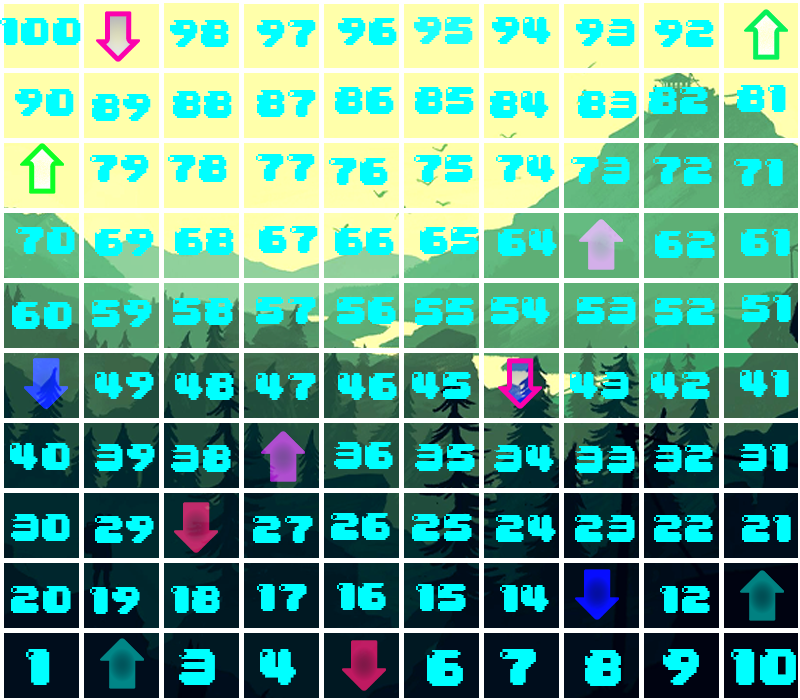
<style>
.page{position:relative;width:800px;height:700px}
.page>*{position:absolute;margin:0}
.t1{font:33.3px "04b30";color:#1efffc}
.t2{font:33.3px "04b30";color:#00ffff}
.t3{font:43.7px "04b30";color:#00ffff}
</style>
<div class="page">
<p class="t1" style="left:414px;top:17px;width:59px;height:27px">95</p>
<p class="t2" style="left:492px;top:17px;width:59px;height:27px">94</p>
<p class="t2" style="left:0px;top:18px;width:81px;height:27px">100</p>
<p class="t2" style="left:170px;top:20px;width:59px;height:27px">98</p>
<p class="t2" style="left:257px;top:20px;width:59px;height:27px">97</p>
<p class="t2" style="left:338px;top:18px;width:59px;height:27px">96</p>
<p class="t2" style="left:576px;top:19px;width:59px;height:27px">93</p>
<p class="t2" style="left:655px;top:20px;width:59px;height:27px">92</p>
<p class="t2" style="left:15px;top:89px;width:59px;height:27px">90</p>
<p class="t2" style="left:335px;top:87px;width:59px;height:27px">86</p>
<p class="t2" style="left:415px;top:87px;width:59px;height:27px">85</p>
<p class="t2" style="left:649px;top:87px;width:59px;height:27px">82</p>
<p class="t2" style="left:737px;top:85px;width:49px;height:27px">81</p>
<p class="t2" style="left:92px;top:94px;width:59px;height:27px">89</p>
<p class="t2" style="left:173px;top:91px;width:59px;height:27px">88</p>
<p class="t2" style="left:257px;top:90px;width:59px;height:27px">87</p>
<p class="t2" style="left:490px;top:91px;width:59px;height:27px">84</p>
<p class="t2" style="left:578px;top:91px;width:59px;height:27px">83</p>
<p class="t2" style="left:90px;top:155px;width:59px;height:27px">79</p>
<p class="t2" style="left:168px;top:155px;width:59px;height:27px">78</p>
<p class="t2" style="left:256px;top:154px;width:59px;height:27px">77</p>
<p class="t2" style="left:329px;top:158px;width:59px;height:27px">76</p>
<p class="t2" style="left:414px;top:155px;width:59px;height:27px">75</p>
<p class="t2" style="left:496px;top:155px;width:59px;height:27px">74</p>
<p class="t2" style="left:571px;top:157px;width:59px;height:27px">73</p>
<p class="t2" style="left:653px;top:157px;width:59px;height:27px">72</p>
<p class="t2" style="left:734px;top:159px;width:49px;height:27px">71</p>
<p class="t2" style="left:16px;top:227px;width:59px;height:27px">70</p>
<p class="t2" style="left:95px;top:229px;width:59px;height:27px">69</p>
<p class="t2" style="left:175px;top:228px;width:59px;height:27px">68</p>
<p class="t2" style="left:259px;top:226px;width:59px;height:27px">67</p>
<p class="t2" style="left:335px;top:228px;width:59px;height:27px">66</p>
<p class="t2" style="left:420px;top:227px;width:59px;height:27px">65</p>
<p class="t2" style="left:498px;top:229px;width:59px;height:27px">64</p>
<p class="t2" style="left:655px;top:231px;width:60px;height:27px">62</p>
<p class="t2" style="left:741px;top:229px;width:49px;height:27px">61</p>
<p class="t2" style="left:12px;top:302px;width:60px;height:27px">60</p>
<p class="t2" style="left:92px;top:300px;width:60px;height:27px">59</p>
<p class="t2" style="left:173px;top:298px;width:60px;height:27px">58</p>
<p class="t2" style="left:256px;top:297px;width:60px;height:27px">57</p>
<p class="t2" style="left:337px;top:297px;width:59px;height:27px">56</p>
<p class="t2" style="left:415px;top:298px;width:59px;height:27px">55</p>
<p class="t2" style="left:491px;top:297px;width:59px;height:27px">54</p>
<p class="t2" style="left:577px;top:297px;width:59px;height:27px">53</p>
<p class="t2" style="left:655px;top:298px;width:60px;height:27px">52</p>
<p class="t2" style="left:742px;top:295px;width:49px;height:27px">51</p>
<p class="t2" style="left:95px;top:372px;width:59px;height:27px">49</p>
<p class="t2" style="left:175px;top:373px;width:59px;height:27px">48</p>
<p class="t2" style="left:256px;top:373px;width:60px;height:27px">47</p>
<p class="t2" style="left:338px;top:373px;width:59px;height:27px">46</p>
<p class="t2" style="left:412px;top:372px;width:59px;height:27px">45</p>
<p class="t2" style="left:570px;top:372px;width:59px;height:27px">43</p>
<p class="t2" style="left:651px;top:372px;width:59px;height:27px">42</p>
<p class="t2" style="left:740px;top:370px;width:49px;height:27px">41</p>
<p class="t2" style="left:10px;top:443px;width:60px;height:27px">40</p>
<p class="t2" style="left:95px;top:444px;width:60px;height:27px">39</p>
<p class="t2" style="left:171px;top:445px;width:60px;height:27px">38</p>
<p class="t2" style="left:334px;top:442px;width:59px;height:27px">36</p>
<p class="t2" style="left:415px;top:444px;width:60px;height:27px">35</p>
<p class="t2" style="left:494px;top:445px;width:60px;height:27px">34</p>
<p class="t2" style="left:575px;top:446px;width:60px;height:27px">33</p>
<p class="t2" style="left:654px;top:445px;width:59px;height:27px">32</p>
<p class="t2" style="left:739px;top:444px;width:49px;height:27px">31</p>
<p class="t2" style="left:11px;top:514px;width:59px;height:27px">30</p>
<p class="t2" style="left:95px;top:516px;width:59px;height:27px">29</p>
<p class="t2" style="left:253px;top:516px;width:60px;height:27px">27</p>
<p class="t2" style="left:331px;top:513px;width:59px;height:27px">26</p>
<p class="t2" style="left:412px;top:514px;width:60px;height:27px">25</p>
<p class="t2" style="left:496px;top:515px;width:60px;height:27px">24</p>
<p class="t2" style="left:575px;top:515px;width:60px;height:27px">23</p>
<p class="t2" style="left:654px;top:515px;width:59px;height:27px">22</p>
<p class="t2" style="left:742px;top:515px;width:49px;height:27px">21</p>
<p class="t2" style="left:11px;top:586px;width:60px;height:27px">20</p>
<p class="t2" style="left:90px;top:587px;width:50px;height:27px">19</p>
<p class="t2" style="left:171px;top:586px;width:49px;height:27px">18</p>
<p class="t2" style="left:257px;top:584px;width:50px;height:27px">17</p>
<p class="t2" style="left:337px;top:583px;width:49px;height:27px">16</p>
<p class="t2" style="left:416px;top:584px;width:50px;height:27px">15</p>
<p class="t2" style="left:500px;top:585px;width:49px;height:27px">14</p>
<p class="t2" style="left:660px;top:586px;width:50px;height:27px">12</p>
<p class="t3" style="left:26px;top:649px;width:24px;height:36px">1</p>
<p class="t3" style="left:179px;top:649px;width:36px;height:36px">3</p>
<p class="t3" style="left:260px;top:649px;width:36px;height:36px">4</p>
<p class="t3" style="left:427px;top:650px;width:36px;height:36px">6</p>
<p class="t3" style="left:500px;top:649px;width:36px;height:36px">7</p>
<p class="t3" style="left:585px;top:650px;width:36px;height:36px">8</p>
<p class="t3" style="left:663px;top:649px;width:36px;height:36px">9</p>
<p class="t3" style="left:731px;top:649px;width:65px;height:36px">10</p>
</div>
